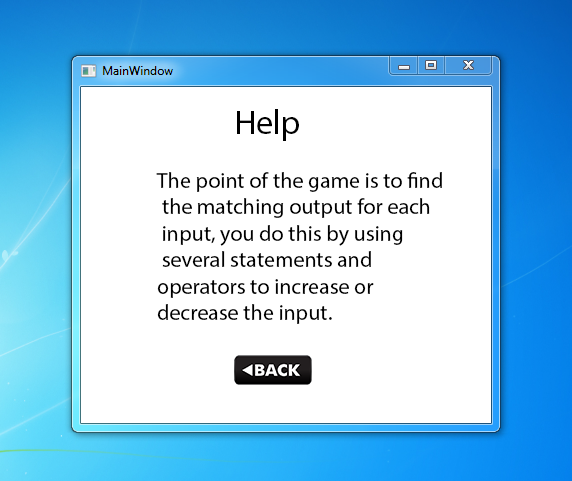
<style>
.page{position:relative;width:572px;height:481px;background:#ffffff}
.page>*{position:absolute;margin:0}
.t1{font:34px "MyriadPro-Regular";color:#000000}
.t2{font:22px "MyriadPro-Regular";color:#000000}
</style>
<div class="page">
<p class="t1" style="left:237px;top:109px;width:62px;height:32px">Help</p>
<p class="t2" style="left:156px;top:172px;width:286px;height:152px">The point of the game is to find<br> the matching output for each<br> input, you do this by using<br> several statements and <br>operators to increase or <br>decrease the input.</p>
</div>
